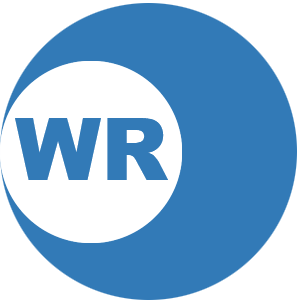
<style>
.page{position:relative;width:297px;height:300px;background:#327ab7}
.page>*{position:absolute;margin:0}
.t1{font:86.1px "Arial-Black";color:#327ab7}
</style>
<div class="page">
<p class="t1" style="left:15px;top:118px;width:153px;height:62px">WR</p>
</div>
